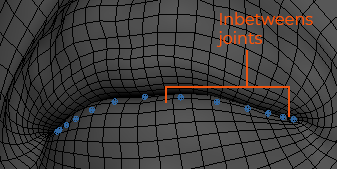
<style>
.page{position:relative;width:337px;height:169px}
.page>*{position:absolute;margin:0}
.t1{font:16px "Montserrat-Regular";color:#ff5400}
</style>
<div class="page">
<p class="t1" style="left:216px;top:12px;width:97px;height:35px">Inbetweens<br>joints</p>
</div>
